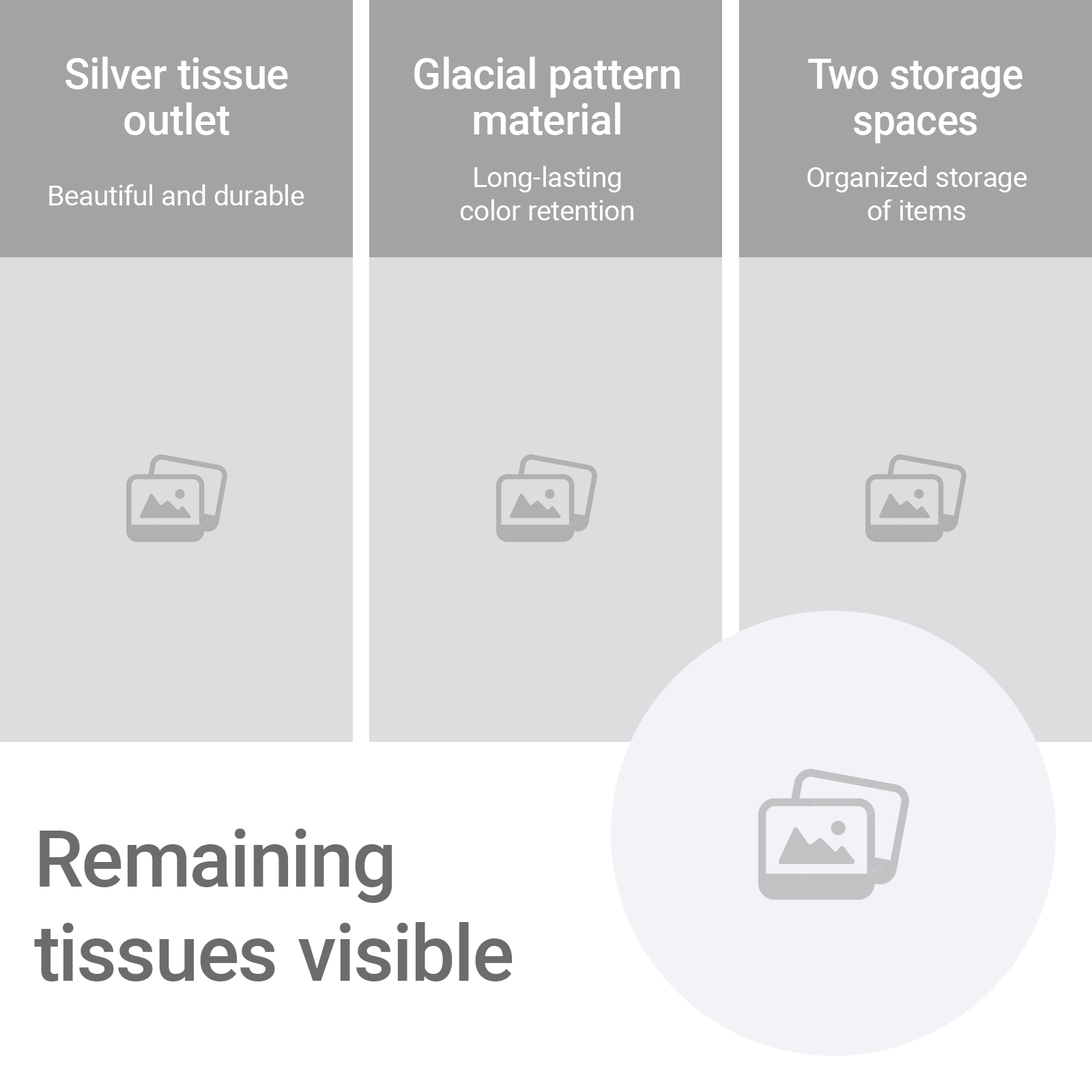
<style>
.page{position:relative;width:1092px;height:1092px;background:#dcdddf}
.page>*{position:absolute;margin:0}
.t1{font:42.2px/45.5px "Roboto-Medium";color:#ffffff}
.t2{font:42.2px/45.5px "Roboto-Medium";color:#ffffff;scale:0.95 1}
.t3{font:27.7px/33.5px "Roboto-Regular";color:#ffffff}
.t4{font:27.7px "Roboto-Regular";color:#ffffff}
.t5{font:78.6px "Roboto-Medium";color:#6c6c6c}
</style>
<div class="page">
<p class="t1" style="left:66px;top:57px;width:222px;height:78px;text-align:center">Silver tissue<br>outlet</p>
<p class="t1" style="left:414px;top:57px;width:266px;height:78px;text-align:center">Glacial pattern<br>material</p>
<p class="t2" style="left:808px;top:59px;width:214px;height:84px;text-align:center">Two storage<br>spaces</p>
<p class="t3" style="left:460px;top:166px;width:173px;height:54px;text-align:center">Long-lasting<br>color retention</p>
<p class="t3" style="left:807px;top:166px;width:220px;height:54px;text-align:center">Organized storage<br>of items</p>
<p class="t4" style="left:49px;top:184px;width:255px;height:21px">Beautiful and durable</p>
<p class="t5" style="left:34px;top:829px;width:479px;height:152px">Remaining <br>tissues visible</p>
</div>
